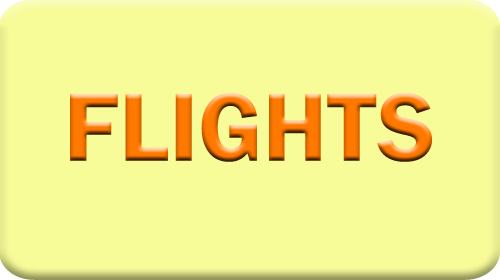
<style>
.page{position:relative;width:500px;height:280px;background:#f7fb98}
.page>*{position:absolute;margin:0}
.t1{font:100px "FranklinGothic-Demi"}
</style>
<div class="page">
<p class="t1" style="left:70px;top:93px;width:362px;height:69px">FLIGHTS</p>
</div>
